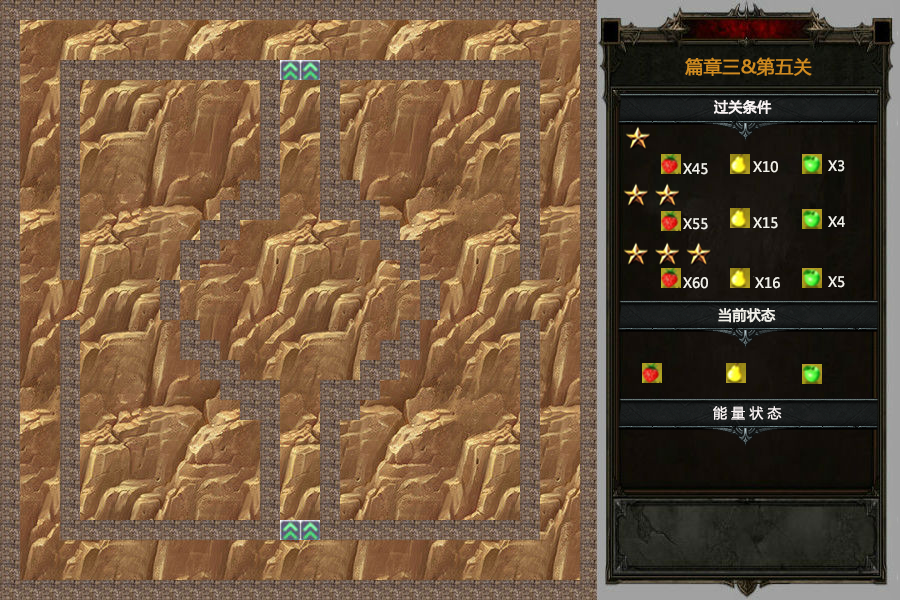
<style>
.page{position:relative;width:900px;height:600px}
.page>*{position:absolute;margin:0}
.t1{font:18px "MicrosoftYaHei";color:#cf8b20;font-weight:bold}
.t2{font:14px "MicrosoftYaHei";color:#f9f3f3;font-weight:bold}
.t3{font:14px "MicrosoftYaHei";color:#f1f0e9}
.t4{font:14px "MicrosoftYaHei";color:#f1f0e9;font-weight:bold}
.t5{font:14px "MicrosoftYaHei";color:#f9f3f3}
</style>
<div class="page">
<p class="t1" style="left:685px;top:57px;width:127px;height:19px">篇章三&amp;第五关</p>
<p class="t2" style="left:714px;top:100px;width:58px;height:15px">过关条件</p>
<p class="t3" style="left:753px;top:161px;width:25px;height:12px">X10</p>
<p class="t3" style="left:828px;top:160px;width:17px;height:12px">X3</p>
<p class="t3" style="left:683px;top:163px;width:25px;height:12px">X45</p>
<p class="t3" style="left:683px;top:218px;width:25px;height:12px">X55</p>
<p class="t3" style="left:753px;top:217px;width:25px;height:12px">X15</p>
<p class="t3" style="left:828px;top:216px;width:17px;height:11px">X4</p>
<p class="t3" style="left:683px;top:277px;width:25px;height:12px">X60</p>
<p class="t3" style="left:755px;top:277px;width:25px;height:12px">X16</p>
<p class="t3" style="left:828px;top:276px;width:17px;height:12px">X5</p>
<p class="t4" style="left:718px;top:308px;width:58px;height:15px">当前状态</p>
<p class="t5" style="left:713px;top:406px;width:69px;height:14px">能 量 状 态</p>
</div>
